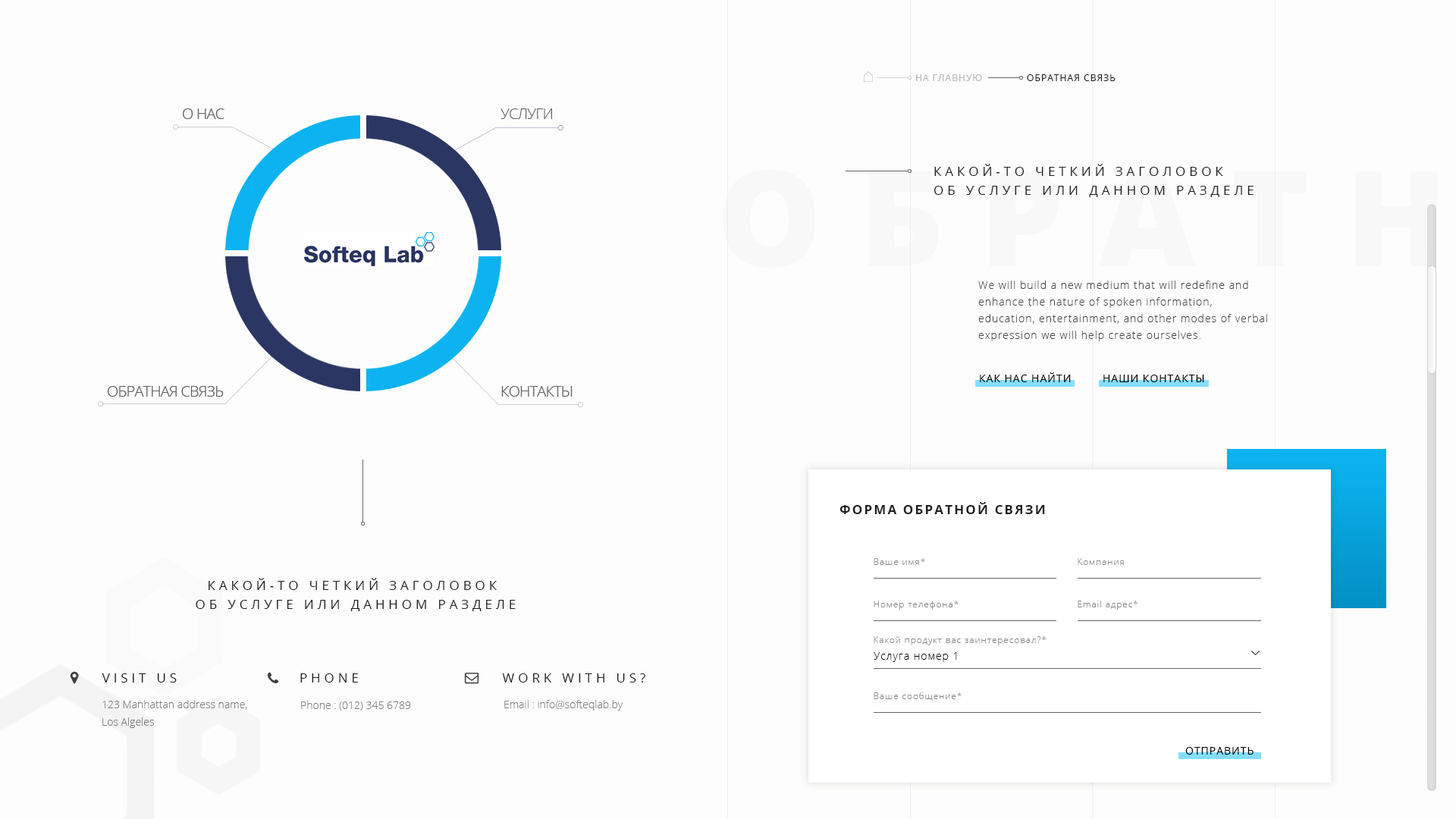
<style>
.page{position:relative;width:1456px;height:819px;background:#fdfdfd}
.page>*{position:absolute;margin:0}
.t1{font:9.4px "OpenSans";letter-spacing:0.07em;color:#b8b8b8}
.t2{font:9.4px "OpenSans";letter-spacing:0.07em;color:#1f1f1f}
.t3{font:14.9px "OpenSans-Light";letter-spacing:-0.03em;color:#636262}
.t4{font:13.1px/19px "OpenSans";letter-spacing:0.27em;color:#1f1f1f}
.t5{font:10.6px/16.7px "OpenSans-Light";letter-spacing:0.07em;color:#464646}
.t6{font:10.6px "OpenSans";letter-spacing:0.07em;color:#010101}
.t7{font:13.1px "OpenSans-Bold";letter-spacing:0.11em;color:#1f1f1f}
.t8{font:9.1px "OpenSans-Light";letter-spacing:0.07em;color:#898989}
.t9{font:10.6px "OpenSans-Light";letter-spacing:0.07em;color:#000000}
.t10{font:13.1px "OpenSans";letter-spacing:0.27em;color:#1f1f1f}
.t11{font:10.6px/17.4px "OpenSans-Light";color:#7c7c7c}
.t12{font:10.6px "OpenSans-Light";color:#7f7f7f}
.t13{font:10.6px "OpenSans-Light";color:#7f7f7f;text-transform:uppercase}
</style>
<div class="page">
<p class="t1" style="left:916px;top:74px;width:66px;height:7px">НА ГЛАВНУЮ</p>
<p class="t2" style="left:1027px;top:74px;width:88px;height:7px">ОБРАТНАЯ СВЯЗЬ</p>
<p class="t3" style="left:183px;top:108px;width:41px;height:11px">О НАС</p>
<p class="t3" style="left:183px;top:108px;width:41px;height:11px">О НАС</p>
<p class="t3" style="left:500px;top:108px;width:52px;height:11px">УСЛУГИ</p>
<p class="t4" style="left:933px;top:164px;width:321px;height:33px">КАКОЙ-ТО ЧЕТКИЙ ЗАГОЛОВОК <br>ОБ УСЛУГЕ ИЛИ ДАННОМ РАЗДЕЛЕ</p>
<p class="t5" style="left:978px;top:281px;width:289px;height:60px">We will build a new medium that will redefine and enhance the nature of spoken information, education, entertainment, and other modes of verbal expression we will help create ourselves.</p>
<p class="t6" style="left:980px;top:372px;width:91px;height:10px">КАК НАС НАЙТИ</p>
<p class="t6" style="left:1103px;top:375px;width:101px;height:7px">НАШИ КОНТАКТЫ</p>
<p class="t3" style="left:108px;top:386px;width:116px;height:11px">ОБРАТНАЯ СВЯЗЬ</p>
<p class="t3" style="left:108px;top:386px;width:116px;height:11px">ОБРАТНАЯ СВЯЗЬ</p>
<p class="t3" style="left:501px;top:386px;width:72px;height:11px">КОНТАКТЫ</p>
<p class="t3" style="left:501px;top:386px;width:72px;height:11px">КОНТАКТЫ</p>
<p class="t7" style="left:839px;top:502px;width:206px;height:12px">ФОРМА ОБРАТНОЙ СВЯЗИ</p>
<p class="t8" style="left:874px;top:558px;width:51px;height:7px">Ваше имя*</p>
<p class="t8" style="left:1078px;top:558px;width:46px;height:7px">Компания</p>
<p class="t4" style="left:196px;top:578px;width:320px;height:33px;text-align:center">КАКОЙ-ТО ЧЕТКИЙ ЗАГОЛОВОК <br>ОБ УСЛУГЕ ИЛИ ДАННОМ РАЗДЕЛЕ</p>
<p class="t8" style="left:874px;top:601px;width:85px;height:9px">Номер телефона*</p>
<p class="t8" style="left:1078px;top:601px;width:60px;height:9px">Email адрес*</p>
<p class="t8" style="left:874px;top:636px;width:172px;height:9px">Какой продукт вас заинтересовал?*</p>
<p class="t9" style="left:874px;top:652px;width:83px;height:10px">Услуга номер 1</p>
<p class="t10" style="left:102px;top:673px;width:75px;height:9px">VISIT US</p>
<p class="t10" style="left:300px;top:673px;width:58px;height:9px">PHONE</p>
<p class="t10" style="left:502px;top:673px;width:143px;height:9px">WORK WITH US?</p>
<p class="t11" style="left:102px;top:700px;width:145px;height:28px">123 Manhattan address name, <br>Los Algeles</p>
<p class="t12" style="left:301px;top:701px;width:110px;height:10px">Phone : (012) 345 6789</p>
<p class="t12" style="left:504px;top:700px;width:119px;height:11px">Email <span class="t13">:</span> info@softeqlab.by</p>
<p class="t8" style="left:874px;top:692px;width:88px;height:9px">Ваше сообщение*</p>
<p class="t6" style="left:1185px;top:747px;width:69px;height:8px">ОТПРАВИТЬ</p>
</div>
